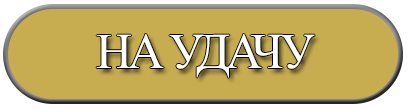
<style>
.page{position:relative;width:410px;height:110px;background:#c8ad50}
.page>*{position:absolute;margin:0}
.t1{font:50.1px "TimesNewRomanPSMT";letter-spacing:-0.075em;color:#ffffff}
</style>
<div class="page">
<p class="t1" style="left:96px;top:34px;width:219px;height:44px">НА УДАЧУ</p>
</div>
